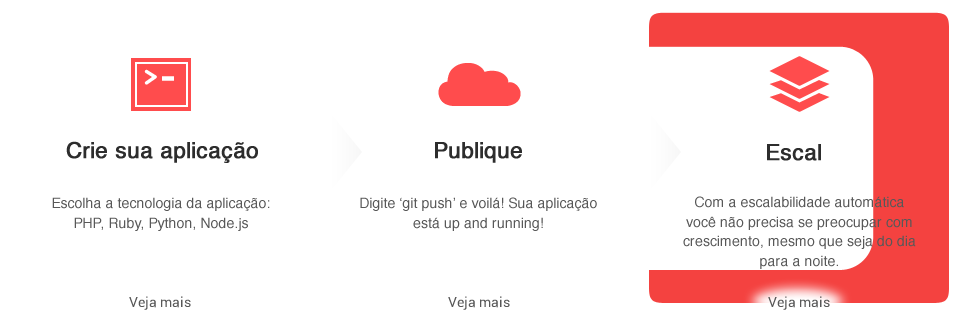
<style>
.page{position:relative;width:960px;height:319px;background:#ffffff}
.page>*{position:absolute;margin:0}
.t1{font:22px "Helvetica";color:#2d2d2d;font-weight:bold}
.t2{font:14px/19.6px "Helvetica";color:#585858}
</style>
<div class="page">
<p class="t1" style="left:66px;top:141px;width:192px;height:22px">Crie sua aplicação</p>
<p class="t1" style="left:435px;top:142px;width:87px;height:21px">Publique</p>
<p class="t1" style="left:767px;top:144px;width:54px;height:17px">Escale</p>
<p class="t2" style="left:52px;top:197px;width:218px;height:34px;text-align:center">Escolha a tecnologia da aplicação:<br>PHP, Ruby, Python, Node.js</p>
<p class="t2" style="left:360px;top:197px;width:237px;height:34px;text-align:center">Digite ‘git push’ e voilá! Sua aplicação está up and running!</p>
<p class="t2" style="left:683px;top:196px;width:233px;height:73px;text-align:center">Com a escalabilidade automática você não precisa se preocupar com crescimento, mesmo que seja do dia para a noite.</p>
</div>
